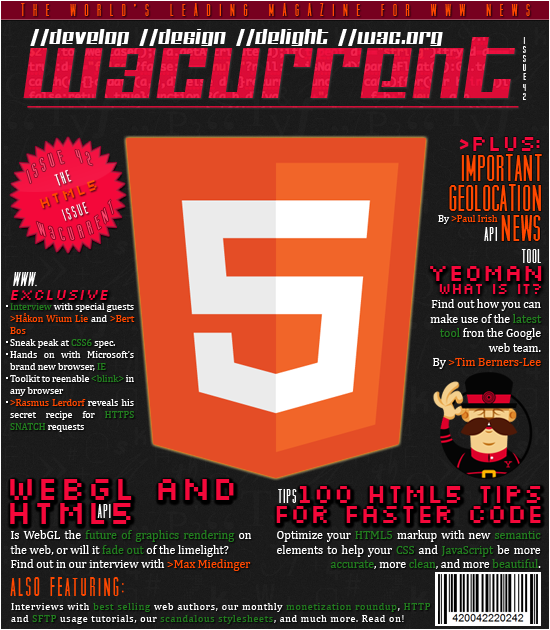
<style>
.page{position:relative;width:550px;height:630px}
.page>*{position:absolute;margin:0}
.t1{font:16.7px "Muncie";letter-spacing:0.5em;color:#ff4800}
.t2{font:16.7px "Duke-Regular";letter-spacing:0.5em;color:#ff4800}
.t3{font:17px "Kitchenpolice";letter-spacing:0.03em;color:#ffffff}
.t4{font:72px "Kitchenpolice";letter-spacing:0.03em;color:#dd0d38;text-decoration:underline}
.t5{font:13.5px "Muncie";color:#ffffff;scale:0.67 1}
.t6{font:36px/30px "Muncie";color:#ff4800}
.t7{font:24px/30px "Silkscreen";color:#f4083a}
.t8{font:24px "ChunkFive-Roman";color:#f4083a}
.t9{font:16px/16px "Silkscreen";letter-spacing:0.1em;color:#ff4800}
.t10{font:16px/16px "Muncie";letter-spacing:0.1em;color:#ffffff}
.t11{font:16px/20px "Muncie";letter-spacing:0.1em;color:#ffffff}
.t12{font:10px "Cambria";color:#ff4800}
.t13{font:10px "Cambria";color:#ffffff}
.t14{font:33px "Muncie";letter-spacing:0.03em;color:#ffffff}
.t15{font:26px "Silkscreen";color:#f4083a}
.t16{font:33px "Muncie";letter-spacing:0.03em;color:#ffffff;font-style:italic}
.t17{font:16px "Silkscreen";letter-spacing:0.03em;color:#f4083a;font-style:italic}
.t18{font:16px "Silkscreen";color:#f4083a}
.t19{font:10px "Cambria";color:#227d1f}
.t20{font:12px "Cambria";color:#ffffff}
.t21{font:12px "Cambria";color:#227d1f}
.t22{font:12px "Cambria";color:#ff4800}
.t23{font:36px "Silkscreen";letter-spacing:0.03em;color:#f4083a}
.t24{font:28px "Silkscreen";letter-spacing:0.001em;color:#f4083a}
.t25{font:25px "Muncie";letter-spacing:0.075em;color:#ff4800}
.t26{font:10px "Cambria";letter-spacing:0.075em;color:#ffffff}
.t27{font:10px "Cambria";letter-spacing:0.075em;color:#227d1f}
</style>
<div class="page">
<p class="t1" style="left:21px;top:3px;width:509px;height:13px">THE WORLD<span class="t2">’</span>S LEADING MAGAZINE FOR WWW NEWS</p>
<p class="t3" style="left:30px;top:29px;width:413px;height:17px">//develop //design //delight //w3c.org</p>
<p class="t4" style="left:23px;top:37px;width:496px;height:71px">W3Current</p>
<p class="t5" style="left:523px;top:37px;width:3px;height:63px">Issue 42</p>
<p class="t6" style="left:449px;top:137px;width:93px;height:104px;text-align:right"><span class="t7">PLUS:<br></span>important <br>Geolocation<br>news</p>
<p class="t8" style="left:459px;top:139px;width:10px;height:11px">&gt;</p>
<p class="t9" style="left:39px;top:169px;width:58px;height:52px;text-align:justify;rotate:-19deg"><span class="t10">THE <br></span>HTML5 <br><span class="t11">issue</span></p>
<p class="t12" style="left:438px;top:215px;width:60px;height:9px"><span class="t13">By </span>&gt;Paul Irish</p>
<p class="t14" style="left:484px;top:227px;width:13px;height:14px">api</p>
<p class="t14" style="left:521px;top:249px;width:20px;height:14px">Tool</p>
<p class="t15" style="left:430px;top:266px;width:112px;height:15px">YEOMAn</p>
<p class="t16" style="left:13px;top:272px;width:24px;height:15px">www.</p>
<p class="t17" style="left:10px;top:290px;width:98px;height:11px">Exclusive</p>
<p class="t18" style="left:439px;top:284px;width:102px;height:10px">What is it?</p>
<p class="t13" style="left:10px;top:303px;width:125px;height:129px;text-align:justify"><span class="t19">Interview</span> with special guests <span class="t12">&gt;Håkon Wium Lie</span> and <span class="t12">&gt;Bert Bos<br></span>Sneak peak at <span class="t19">CSS6</span> spec.<br>Hands on with Microsoft’s brand new browser, <span class="t19">IE<br></span>Toolkit to reenable <span class="t19">&lt;blink&gt;</span> in any browser<br><span class="t12">&gt;Rasmus Lerdorf</span> reveals his secret recipe for <span class="t19">HTTPS SNATCH </span>requests</p>
<p class="t20" style="left:430px;top:299px;width:112px;height:53px;text-align:right">Find out how you can make use of the <span class="t21">latest tool</span> fron the Google web team.</p>
<p class="t22" style="left:433px;top:358px;width:108px;height:11px"><span class="t20">By </span>&gt;Tim Berners-Lee</p>
<p class="t23" style="left:10px;top:479px;width:224px;height:45px">WEBGL and HTML5</p>
<p class="t24" style="left:276px;top:486px;width:265px;height:37px">100 html5 tips for faster code</p>
<p class="t14" style="left:278px;top:489px;width:19px;height:14px">Tips</p>
<p class="t14" style="left:97px;top:504px;width:14px;height:14px">API</p>
<p class="t20" style="left:10px;top:530px;width:242px;height:41px;text-align:justify">Is WebGL the <span class="t21">future of graphics rendering</span> on the web, or will it <span class="t21">fade out</span> of the limelight? <br>Find out in our interview with <span class="t22">&gt;Max Miedinger</span></p>
<p class="t20" style="left:277px;top:530px;width:264px;height:39px;text-align:justify">Optimize your <span class="t21">HTML5</span> markup with new <span class="t21">semantic</span> elements to help your <span class="t21">CSS</span> and <span class="t21">JavaScript</span> be more <span class="t21">accurate</span>, more <span class="t21">clean</span>, and more <span class="t21">beautiful</span>.</p>
<p class="t25" style="left:10px;top:577px;width:114px;height:19px">Also featuring:</p>
<p class="t26" style="left:11px;top:603px;width:420px;height:21px;text-align:justify">Interviews with <span class="t27">best selling </span>web authors, our monthly <span class="t27">monetization roundup</span>, <span class="t27">HTTP </span>and <span class="t27">SFTP</span> usage tutorials, our <span class="t27">scandalous stylesheets</span>, and much more. Read on!</p>
</div>
